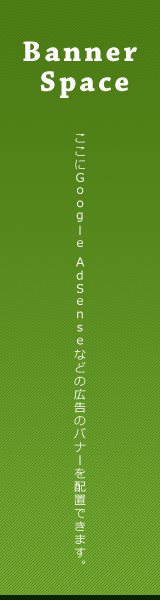
<style>
.page{position:relative;width:160px;height:600px;background:#528b00}
.page>*{position:absolute;margin:0}
.t1{font:30px/30px "ChaparralPro-Bold";letter-spacing:0.1em;color:#ffffff}
.t2{font:12px/24px "Meiryo";letter-spacing:0.1em;color:#ffffff}
</style>
<div class="page">
<p class="t1" style="left:23px;top:41px;width:114px;height:57px;text-align:center">Banner<br> Space</p>
<p class="t2" style="left:74px;top:134px;width:12px;height:430px">ここにGoogle AdSenseなどの広告のバナーを配置できます。</p>
</div>
